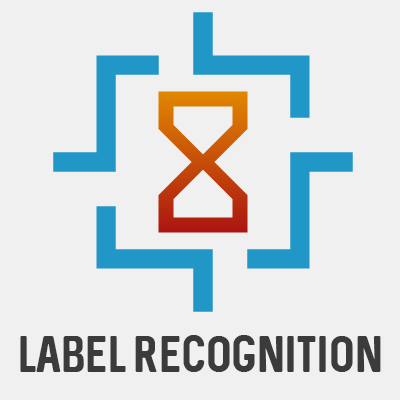
<style>
.page{position:relative;width:400px;height:400px;background:#f0f0f0}
.page>*{position:absolute;margin:0}
.t1{font:41px "Sequel-Regular";color:#3b3b3b}
</style>
<div class="page">
<p class="t1" style="left:20px;top:335px;width:361px;height:37px">Label Recognition</p>
</div>
